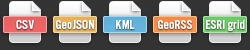
<style>
.page{position:relative;width:250px;height:50px;background:#333333}
.page>*{position:absolute;margin:0}
.t1{font:13px "AlternateGothicFSThree";letter-spacing:0.025em;color:#ffffff}
</style>
<div class="page">
<p class="t1" style="left:16px;top:20px;width:18px;height:9px">CSV</p>
<p class="t1" style="left:56px;top:20px;width:38px;height:9px">GeoJSON</p>
<p class="t1" style="left:116px;top:20px;width:19px;height:9px">KML</p>
<p class="t1" style="left:158px;top:20px;width:34px;height:9px">GeoRSS</p>
<p class="t1" style="left:206px;top:20px;width:39px;height:11px">ESRI grid</p>
</div>
